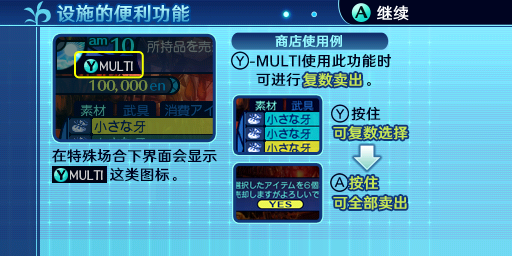
<style>
.page{position:relative;width:512px;height:256px}
.page>*{position:absolute;margin:0}
.t1{font:18.7px "HYWenHei-FEW";letter-spacing:0.025em}
.t2{font:16px "HYWenHei-FEW";letter-spacing:0.025em;color:#fefefe}
.t3{font:13.3px "HYWenHei-FEW";letter-spacing:0.025em;color:#94f7ff}
.t4{font:14.7px/18.7px "HYWenHei-FEW";letter-spacing:0.025em;color:#000421}
.t5{font:14.7px "HYWenHei-FEW";letter-spacing:0.025em;color:#c6e752}
.t6{font:14.7px "HYWenHei-FEW";letter-spacing:0.025em;color:#000421}
.t7{font:14.7px/20px "HYWenHei-FEW";letter-spacing:0.025em;color:#c6e752}
</style>
<div class="page">
<p class="t1" style="left:57px;top:4px;width:133px;height:19px">设施的便利功能</p>
<p class="t2" style="left:377px;top:5px;width:32px;height:16px">继续</p>
<p class="t3" style="left:275px;top:34px;width:67px;height:14px">商店使用例</p>
<p class="t4" style="left:256px;top:54px;width:135px;height:32px">MULTI使用此功能时<br>可进行            。</p>
<p class="t5" style="left:303px;top:73px;width:59px;height:14px">复数卖出</p>
<p class="t6" style="left:351px;top:106px;width:30px;height:15px">按住</p>
<p class="t5" style="left:333px;top:126px;width:75px;height:14px">可复数选择</p>
<p class="t4" style="left:52px;top:149px;width:165px;height:33px">在特殊场合下界面会显示<br>           这类图标。</p>
<p class="t7" style="left:333px;top:175px;width:74px;height:35px">按住<br>可全部卖出</p>
</div>
